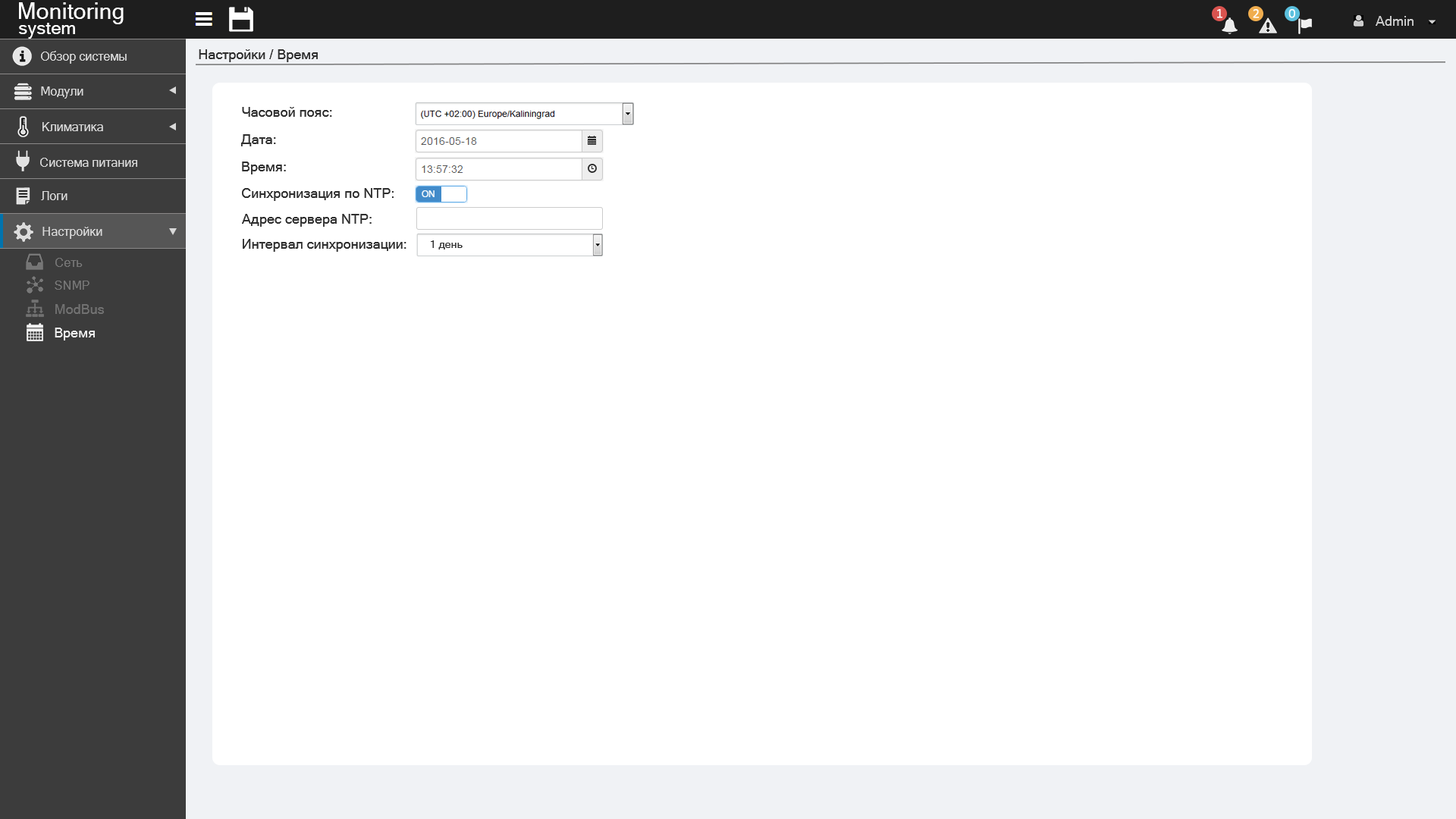
<style>
.page{position:relative;width:1456px;height:819px;background:#ffffff}
.page>*{position:absolute;margin:0}
.t1{font:22.7px "MicrosoftSansSerif";color:#ffffff}
.t2{font:18.2px "MicrosoftSansSerif";color:#ffffff}
.t3{font:12.1px "MicrosoftSansSerif";color:#d9d9d9}
.t4{font:13.6px "MicrosoftSansSerif";color:#2f2f2f}
.t5{font:10.6px "MicrosoftSansSerif";color:#2f2f2f}
.t6{font:12.1px "MicrosoftSansSerif";color:#777777}
.t7{font:13.6px "MicrosoftSansSerif";color:#717171}
.t8{font:13.6px "MicrosoftSansSerif";color:#f3f3f3}
</style>
<div class="page">
<p class="t1" style="left:19px;top:2px;width:105px;height:22px">Monitoring</p>
<p class="t2" style="left:19px;top:23px;width:56px;height:16px">system</p>
<p class="t3" style="left:41px;top:51px;width:86px;height:13px">Обзор системы</p>
<p class="t4" style="left:199px;top:49px;width:119px;height:13px">Настройки / Время</p>
<p class="t3" style="left:41px;top:86px;width:42px;height:13px">Модули</p>
<p class="t4" style="left:242px;top:107px;width:90px;height:10px">Часовой пояс:</p>
<p class="t3" style="left:42px;top:122px;width:61px;height:9px">Климатика</p>
<p class="t4" style="left:241px;top:134px;width:35px;height:12px">Дата:</p>
<p class="t3" style="left:40px;top:158px;width:97px;height:9px">Система питания</p>
<p class="t4" style="left:242px;top:162px;width:44px;height:12px">Время:</p>
<p class="t3" style="left:41px;top:191px;width:26px;height:9px">Логи</p>
<p class="t4" style="left:242px;top:188px;width:152px;height:13px">Синхронизация по NTP:</p>
<p class="t4" style="left:242px;top:214px;width:130px;height:13px">Адрес сервера NTP:</p>
<p class="t3" style="left:42px;top:227px;width:60px;height:12px">Настройки</p>
<p class="t4" style="left:243px;top:239px;width:163px;height:13px">Интервал синхронизации:</p>
<p class="t5" style="left:431px;top:240px;width:32px;height:9px">1 день</p>
<p class="t6" style="left:55px;top:258px;width:28px;height:9px">Сеть</p>
<p class="t6" style="left:55px;top:281px;width:34px;height:9px">SNMP</p>
<p class="t7" style="left:55px;top:304px;width:49px;height:10px">ModBus</p>
<p class="t8" style="left:55px;top:328px;width:40px;height:12px">Время</p>
</div>
